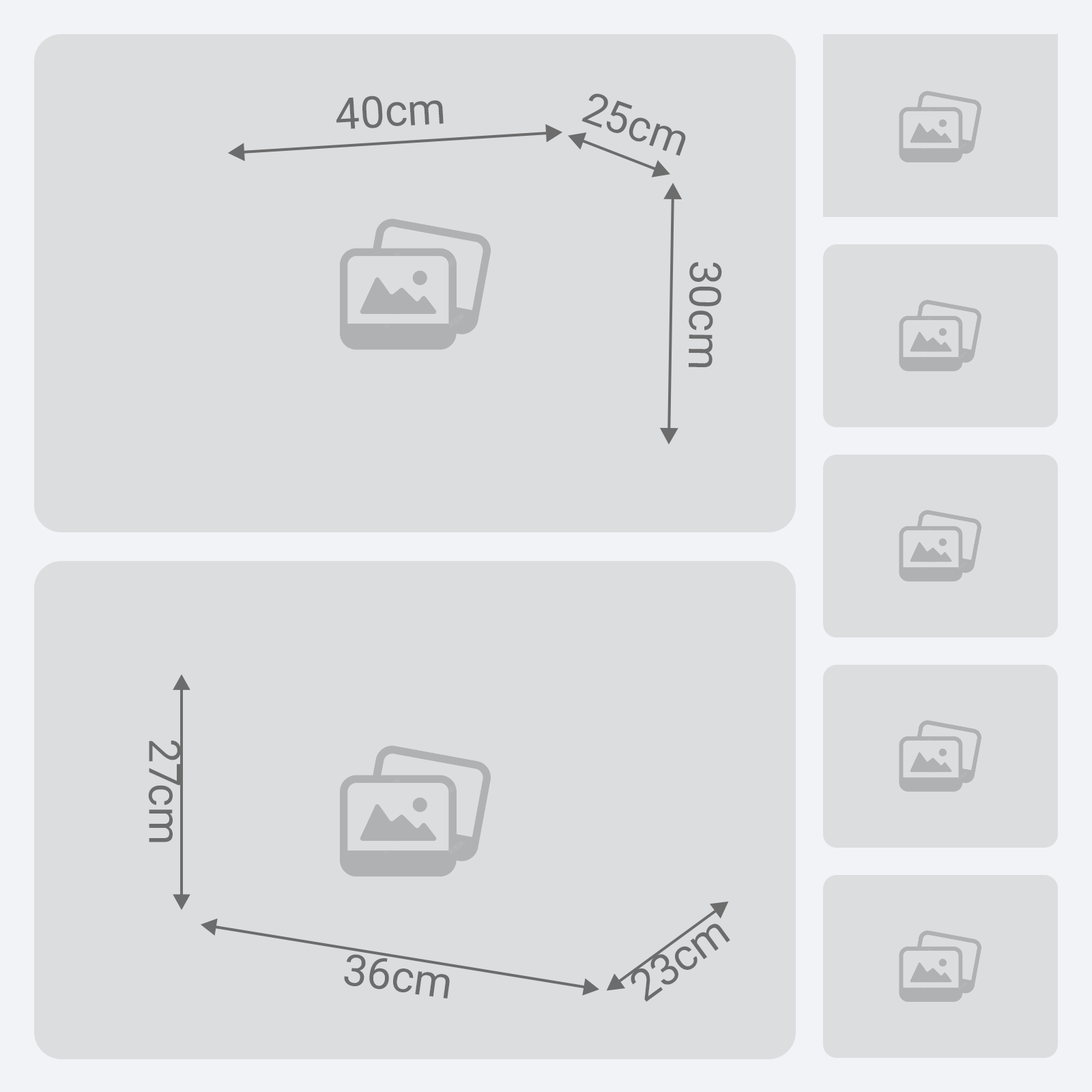
<style>
.page{position:relative;width:1092px;height:1092px;background:#dcdddf}
.page>*{position:absolute;margin:0}
.t1{font:43.7px "Roboto-Regular";color:#6c6c6c}
</style>
<div class="page">
<p class="t1" style="left:336px;top:96px;width:108px;height:33px;rotate:-3deg">40cm</p>
<p class="t1" style="left:581px;top:94px;width:105px;height:62px;rotate:20deg">25cm</p>
<p class="t1" style="left:689px;top:262px;width:33px;height:105px;rotate:91deg">30cm</p>
<p class="t1" style="left:148px;top:741px;width:33px;height:101px;rotate:90deg">27cm</p>
<p class="t1" style="left:631px;top:923px;width:99px;height:79px;rotate:-36deg">23cm</p>
<p class="t1" style="left:344px;top:954px;width:106px;height:44px;rotate:8deg">36cm</p>
</div>
